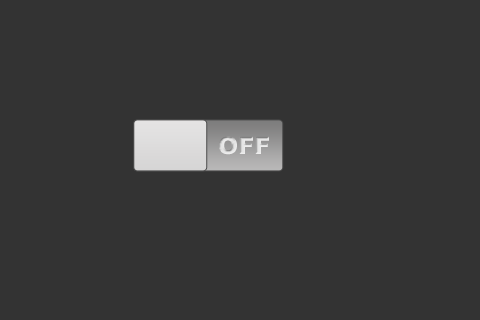
<style>
.page{position:relative;width:480px;height:320px;background:#333333}
.page>*{position:absolute;margin:0}
.t1{font:24px "Arial-Black"}
</style>
<div class="page">
<p class="t1" style="left:219px;top:136px;width:50px;height:19px">OFF</p>
</div>
